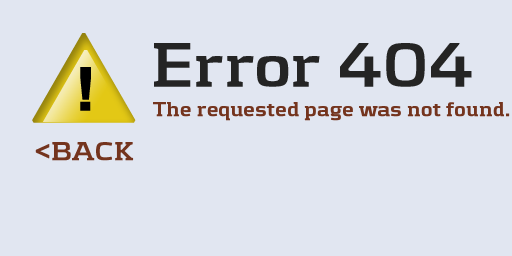
<style>
.page{position:relative;width:512px;height:256px;background:#e1e6f1}
.page>*{position:absolute;margin:0}
.t1{font:64px "Kontrapunkt-Bold";letter-spacing:0.01em;color:#242424;font-weight:bold}
.t2{font:60px "Arial-BoldMT";letter-spacing:0.01em;color:#000000;font-weight:bold}
.t3{font:20px "Kontrapunkt-Bold";letter-spacing:0.01em;color:#74341e;font-weight:bold}
.t4{font:27.1px "Kontrapunkt-Bold";letter-spacing:0.01em;color:#74341e;font-weight:bold}
</style>
<div class="page">
<p class="t1" style="left:154px;top:43px;width:318px;height:44px">Error 404</p>
<p class="t2" style="left:80px;top:67px;width:11px;height:44px">!</p>
<p class="t3" style="left:153px;top:102px;width:357px;height:19px">The requested page was not found.</p>
<p class="t4" style="left:35px;top:142px;width:99px;height:19px">&lt;BACK</p>
</div>
